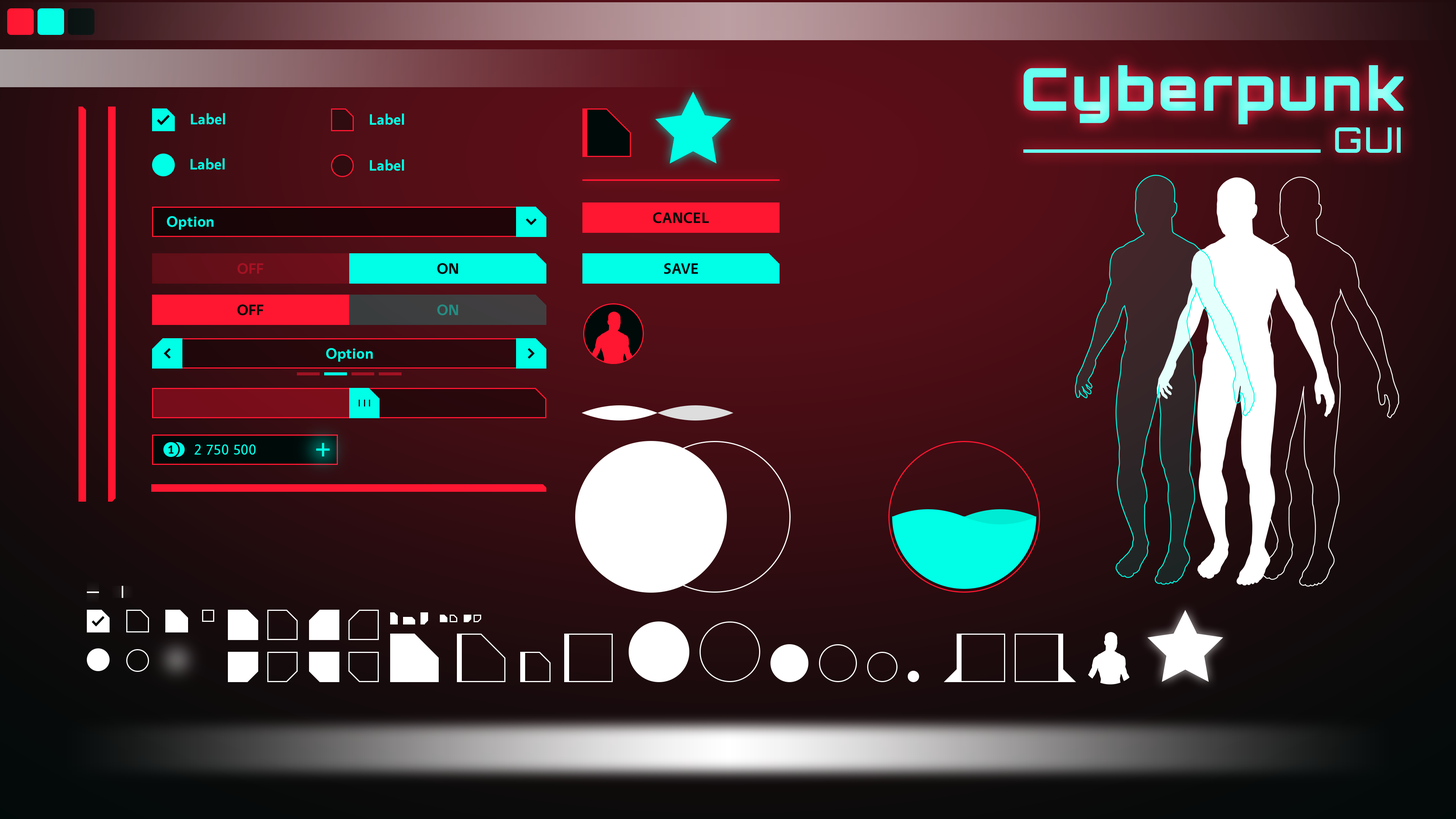
<style>
.page{position:relative;width:1456px;height:819px}
.page>*{position:absolute;margin:0}
.t1{font:59.1px "Orbitron-Black";letter-spacing:0.05em;color:#69fff0}
.t2{font:35.2px "Orbitron-Medium";letter-spacing:0.05em;color:#69fff0}
.t3{font:15.2px "Vegur-Bold";letter-spacing:0.025em;color:#00ffe6}
.t4{font:15.2px "Vegur-Bold";letter-spacing:0.025em;color:#000a09;text-transform:uppercase}
.t5{font:15.2px "Vegur-Regular";letter-spacing:0.025em;color:#00ffe6}
</style>
<div class="page">
<p class="t1" style="left:1023px;top:65px;width:381px;height:88px;text-align:right">Cyberpunk<br><span class="t2">GUI</span></p>
<p class="t3" style="left:191px;top:113px;width:34px;height:12px">Label</p>
<p class="t3" style="left:370px;top:113px;width:34px;height:12px">Label</p>
<p class="t3" style="left:190px;top:158px;width:35px;height:12px">Label</p>
<p class="t3" style="left:370px;top:159px;width:34px;height:12px">Label</p>
<p class="t3" style="left:167px;top:216px;width:46px;height:14px">Option</p>
<p class="t4" style="left:653px;top:212px;width:56px;height:11px">Cancel</p>
<p class="t4" style="left:664px;top:263px;width:34px;height:11px">Save</p>
<p class="t3" style="left:326px;top:348px;width:47px;height:14px">Option</p>
<p class="t5" style="left:195px;top:444px;width:61px;height:11px">2 750 500</p>
</div>
